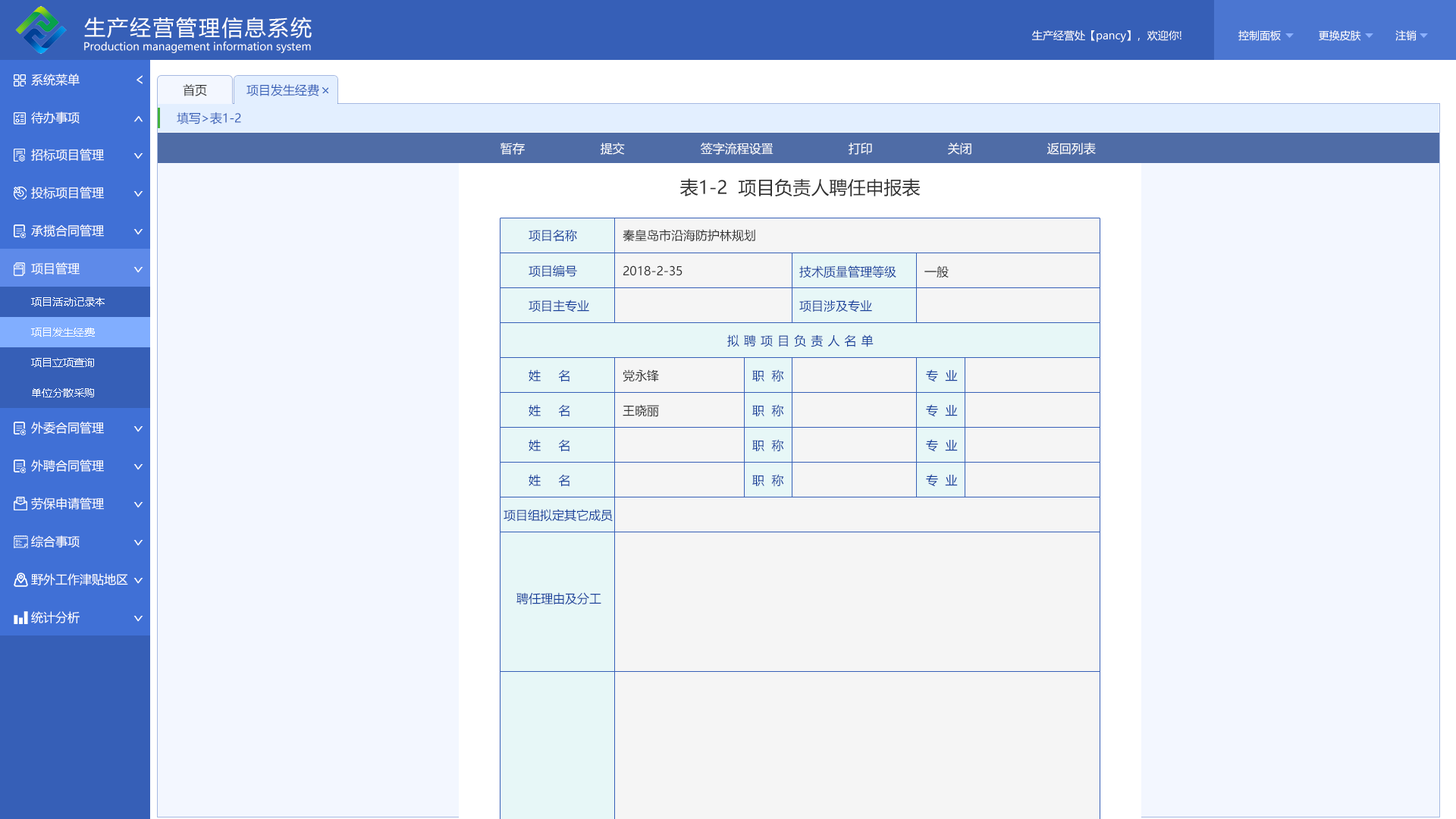
<style>
.page{position:relative;width:1456px;height:819px;background:#f3f7ff}
.page>*{position:absolute;margin:0}
.t1{font:21.2px "MicrosoftYaHei";letter-spacing:0.08em;color:#ffffff}
.t2{font:10.6px "MicrosoftYaHei";color:#ffffff}
.t3{font:12.1px "MicrosoftYaHei";color:#ffffff}
.t4{font:17px "MicrosoftYaHei";color:#ffffff;scale:0.73 1}
.t5{font:12.1px "MicrosoftYaHei";color:#333333}
.t6{font:12.1px "MicrosoftYaHei";color:#365fb7}
.t7{font:17px "MicrosoftYaHei";color:#ffffff;scale:0.71 1}
.t8{font:18.2px "MicrosoftYaHei";color:#313131}
.t9{font:12.1px "MicrosoftYaHei";color:#18419b}
.t10{font:12.1px "MicrosoftYaHei";color:#313131}
.t11{font:12.1px "MicrosoftYaHei";letter-spacing:0.38em;color:#18419b}
</style>
<div class="page">
<p class="t1" style="left:84px;top:17px;width:228px;height:22px">生产经营管理信息系统</p>
<p class="t2" style="left:84px;top:41px;width:227px;height:12px">Production management information system</p>
<p class="t2" style="left:1032px;top:30px;width:149px;height:12px">生产经营处【pancy】，欢迎你!</p>
<p class="t2" style="left:1238px;top:30px;width:179px;height:11px">控制面板            更换皮肤           注销</p>
<p class="t3" style="left:31px;top:74px;width:49px;height:12px">系统菜单</p>
<p class="t4" style="left:136px;top:75px;width:7px;height:9px;rotate:180deg">&gt;</p>
<p class="t5" style="left:183px;top:84px;width:24px;height:12px">首页</p>
<p class="t6" style="left:246px;top:84px;width:73px;height:12px">项目发生经费</p>
<p class="t3" style="left:31px;top:111px;width:49px;height:13px">待办事项</p>
<p class="t6" style="left:177px;top:112px;width:64px;height:12px">填写&gt;表1-2</p>
<p class="t7" style="left:133px;top:116px;width:10px;height:6px;rotate:-90deg">&gt;</p>
<p class="t3" style="left:31px;top:149px;width:73px;height:12px">招标项目管理</p>
<p class="t3" style="left:500px;top:143px;width:25px;height:12px">暂存</p>
<p class="t3" style="left:601px;top:143px;width:24px;height:12px">提交</p>
<p class="t3" style="left:701px;top:143px;width:72px;height:12px">签字流程设置</p>
<p class="t3" style="left:849px;top:143px;width:23px;height:12px">打印</p>
<p class="t3" style="left:948px;top:143px;width:23px;height:12px">关闭</p>
<p class="t3" style="left:1047px;top:143px;width:49px;height:12px">返回列表</p>
<p class="t7" style="left:133px;top:153px;width:10px;height:6px;rotate:90deg">&gt;</p>
<p class="t8" style="left:680px;top:178px;width:241px;height:19px">表1-2  项目负责人聘任申报表</p>
<p class="t3" style="left:31px;top:187px;width:73px;height:12px">投标项目管理</p>
<p class="t7" style="left:133px;top:191px;width:10px;height:6px;rotate:90deg">&gt;</p>
<p class="t3" style="left:31px;top:224px;width:73px;height:13px">承揽合同管理</p>
<p class="t7" style="left:133px;top:229px;width:10px;height:6px;rotate:90deg">&gt;</p>
<p class="t9" style="left:529px;top:229px;width:48px;height:13px">项目名称</p>
<p class="t10" style="left:623px;top:229px;width:132px;height:13px">秦皇岛市沿海防护林规划</p>
<p class="t3" style="left:31px;top:262px;width:49px;height:13px">项目管理</p>
<p class="t7" style="left:133px;top:267px;width:10px;height:6px;rotate:90deg">&gt;</p>
<p class="t9" style="left:529px;top:265px;width:48px;height:13px">项目编号</p>
<p class="t10" style="left:623px;top:265px;width:59px;height:11px">2018-2-35</p>
<p class="t9" style="left:799px;top:265px;width:97px;height:13px">技术质量管理等级</p>
<p class="t10" style="left:924px;top:265px;width:25px;height:13px">一般</p>
<p class="t2" style="left:31px;top:297px;width:74px;height:9px">项目活动记录本</p>
<p class="t9" style="left:529px;top:300px;width:60px;height:12px">项目主专业</p>
<p class="t9" style="left:799px;top:300px;width:73px;height:12px">项目涉及专业</p>
<p class="t2" style="left:31px;top:328px;width:64px;height:9px">项目发生经费</p>
<p class="t11" style="left:727px;top:334px;width:147px;height:13px">拟聘项目负责人名单</p>
<p class="t2" style="left:31px;top:358px;width:63px;height:9px">项目立项查询</p>
<p class="t9" style="left:529px;top:369px;width:41px;height:13px">姓     名</p>
<p class="t10" style="left:623px;top:369px;width:36px;height:13px">党永锋</p>
<p class="t9" style="left:752px;top:369px;width:32px;height:13px">职  称</p>
<p class="t9" style="left:926px;top:369px;width:32px;height:13px">专  业</p>
<p class="t2" style="left:32px;top:388px;width:62px;height:9px">单位分散采购</p>
<p class="t9" style="left:529px;top:404px;width:41px;height:13px">姓     名</p>
<p class="t10" style="left:623px;top:404px;width:36px;height:13px">王晓丽</p>
<p class="t9" style="left:752px;top:404px;width:32px;height:13px">职  称</p>
<p class="t9" style="left:926px;top:404px;width:32px;height:13px">专  业</p>
<p class="t3" style="left:31px;top:422px;width:73px;height:12px">外委合同管理</p>
<p class="t7" style="left:133px;top:426px;width:10px;height:6px;rotate:90deg">&gt;</p>
<p class="t9" style="left:529px;top:439px;width:41px;height:13px">姓     名</p>
<p class="t9" style="left:752px;top:439px;width:32px;height:13px">职  称</p>
<p class="t9" style="left:926px;top:439px;width:32px;height:13px">专  业</p>
<p class="t3" style="left:31px;top:460px;width:73px;height:12px">外聘合同管理</p>
<p class="t7" style="left:133px;top:464px;width:10px;height:6px;rotate:90deg">&gt;</p>
<p class="t9" style="left:529px;top:474px;width:41px;height:13px">姓     名</p>
<p class="t9" style="left:752px;top:474px;width:32px;height:13px">职  称</p>
<p class="t9" style="left:926px;top:474px;width:32px;height:13px">专  业</p>
<p class="t3" style="left:31px;top:497px;width:73px;height:13px">劳保申请管理</p>
<p class="t7" style="left:133px;top:502px;width:10px;height:6px;rotate:90deg">&gt;</p>
<p class="t9" style="left:504px;top:509px;width:109px;height:13px">项目组拟定其它成员</p>
<p class="t3" style="left:31px;top:535px;width:49px;height:13px">综合事项</p>
<p class="t7" style="left:133px;top:540px;width:10px;height:6px;rotate:90deg">&gt;</p>
<p class="t3" style="left:31px;top:573px;width:97px;height:12px">野外工作津贴地区</p>
<p class="t7" style="left:133px;top:578px;width:10px;height:6px;rotate:90deg">&gt;</p>
<p class="t9" style="left:516px;top:592px;width:85px;height:13px">聘任理由及分工</p>
<p class="t3" style="left:31px;top:611px;width:49px;height:12px">统计分析</p>
<p class="t7" style="left:133px;top:616px;width:10px;height:6px;rotate:90deg">&gt;</p>
</div>
